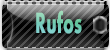
<style>
.page{position:relative;width:110px;height:50px}
.page>*{position:absolute;margin:0}
.t1{font:30.4px "Aharoni-Bold";color:#78ceb9;scale:0.59 1}
</style>
<div class="page">
<p class="t1" style="left:36px;top:10px;width:46px;height:24px">Rufos</p>
</div>
